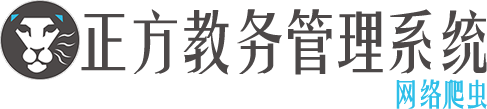
<style>
.page{position:relative;width:487px;height:109px;background:#ffffff}
.page>*{position:absolute;margin:0}
.t1{font:66.2px "FZYTK--GBK1-0";letter-spacing:-0.209em;color:#4c4848}
.t2{font:30px "FZYTK--GBK1-0";letter-spacing:-0.209em;color:#2ebfe9}
</style>
<div class="page">
<p class="t1" style="left:81px;top:9px;width:406px;height:66px">正方教务管理系统</p>
<p class="t2" style="left:396px;top:79px;width:91px;height:30px">网络爬虫</p>
</div>
